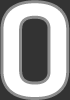
<style>
.page{position:relative;width:70px;height:100px;background:#ffffff}
.page>*{position:absolute;margin:0}
.t1{font:128.8px "Bahnschrift";color:#ffffff;scale:1.2 1}
</style>
<div class="page">
<p class="t1" style="left:3px;top:3px;width:64px;height:94px">0</p>
</div>
